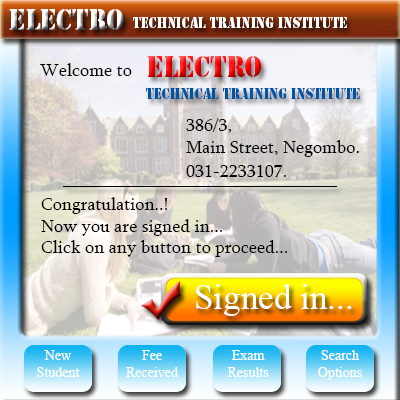
<style>
.page{position:relative;width:400px;height:400px}
.page>*{position:absolute;margin:0}
.t1{font:26.9px "StencilStd";scale:0.91 1}
.t2{font:13.4px "StencilStd";color:#ffffff;scale:0.91 1}
.t3{font:18px "Sylfaen";color:#000000}
.t4{font:13.4px "StencilStd";color:#0054a6;scale:0.91 1}
.t5{font:35px "TimesNewRomanPSMT";color:#ffffff}
.t6{font:14px "TimesNewRomanPSMT";color:#ffffff}
</style>
<div class="page">
<p class="t1" style="left:9px;top:9px;width:115px;height:21px">Electro</p>
<p class="t2" style="left:133px;top:17px;width:214px;height:11px">Technical Training Institute</p>
<p class="t3" style="left:40px;top:63px;width:92px;height:13px">Welcome to</p>
<p class="t1" style="left:147px;top:56px;width:115px;height:21px">Electro</p>
<p class="t4" style="left:146px;top:88px;width:214px;height:11px">Technical Training Institute</p>
<p class="t3" style="left:186px;top:118px;width:173px;height:39px">386/3,<br>Main Street, Negombo.</p>
<p class="t3" style="left:186px;top:165px;width:100px;height:12px">031-2233107.</p>
<p class="t3" style="left:41px;top:197px;width:246px;height:60px">Congratulation..!<br>Now you are signed in...<br>Click on any button to proceed...</p>
<p class="t5" style="left:196px;top:284px;width:156px;height:32px">Signed in...</p>
<p class="t6" style="left:37px;top:350px;width:43px;height:27px;text-align:center">New<br>Student</p>
<p class="t6" style="left:126px;top:350px;width:53px;height:27px;text-align:center">Fee<br>Received</p>
<p class="t6" style="left:227px;top:350px;width:42px;height:27px;text-align:center">Exam<br>Results</p>
<p class="t6" style="left:318px;top:350px;width:44px;height:30px;text-align:center">Search<br>Options</p>
</div>
